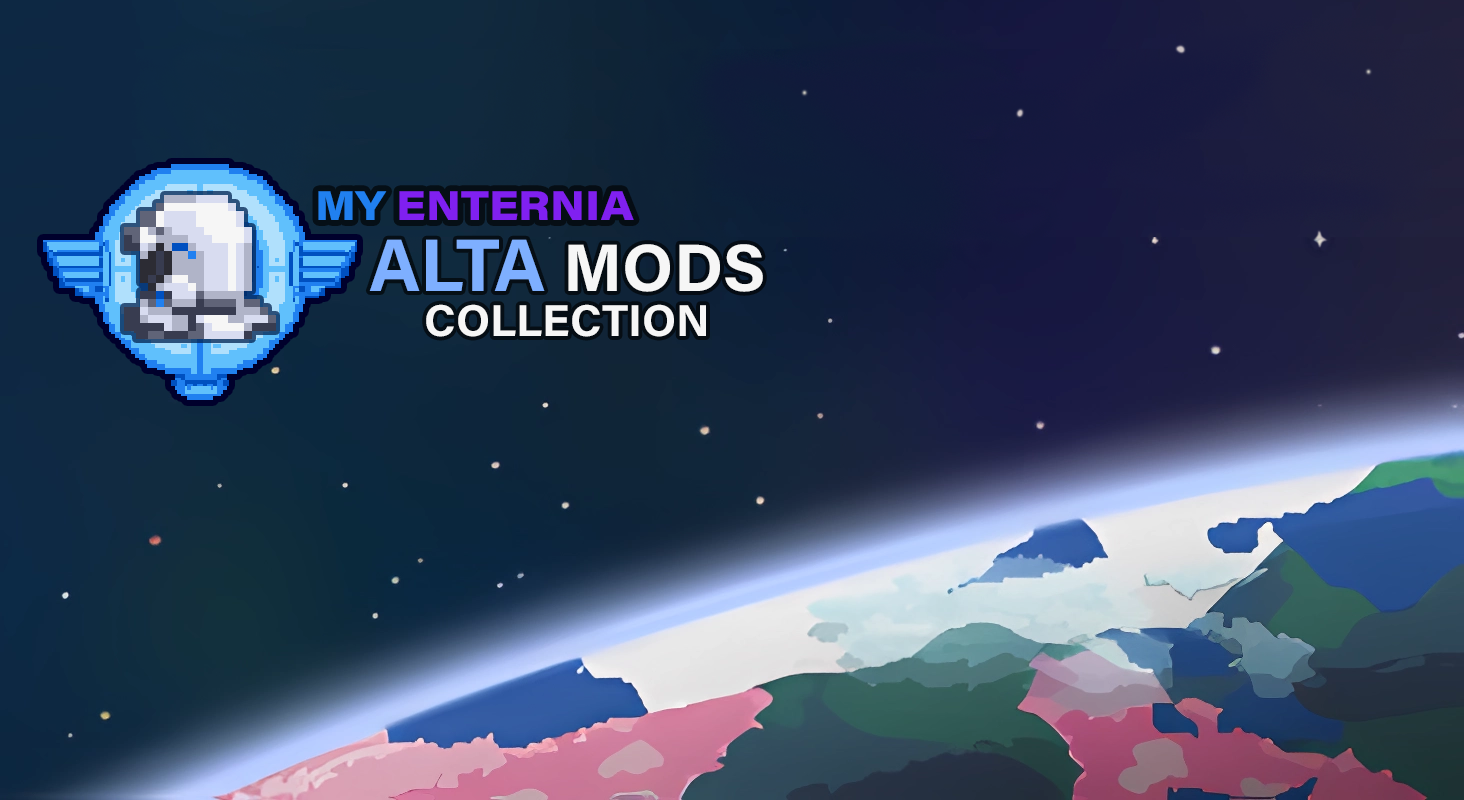
<style>
.page{position:relative;width:1464px;height:800px}
.page>*{position:absolute;margin:0}
.t1{font:40.9px "AcuminConcept_760.000wght_112.000wdth";color:#8020f0}
.t2{font:40.9px "AcuminConcept_760.000wght_112.000wdth";color:#2080f0}
.t3{font:44.7px/44.7px "AcuminConcept-Bold";color:#f6f6f6}
.t4{font:74.4px/44.7px "AcuminConcept-Bold";color:#7eafff}
.t5{font:67px/44.7px "AcuminConcept-Bold";color:#f6f6f6}
</style>
<div class="page">
<p class="t1" style="left:318px;top:191px;width:316px;height:29px"><span class="t2">MY </span>ENTERNIA</p>
<p class="t3" style="left:369px;top:239px;width:394px;height:98px;text-align:center"><span class="t4">ALTA </span><span class="t5">MODS<br></span>COLLECTION</p>
</div>
